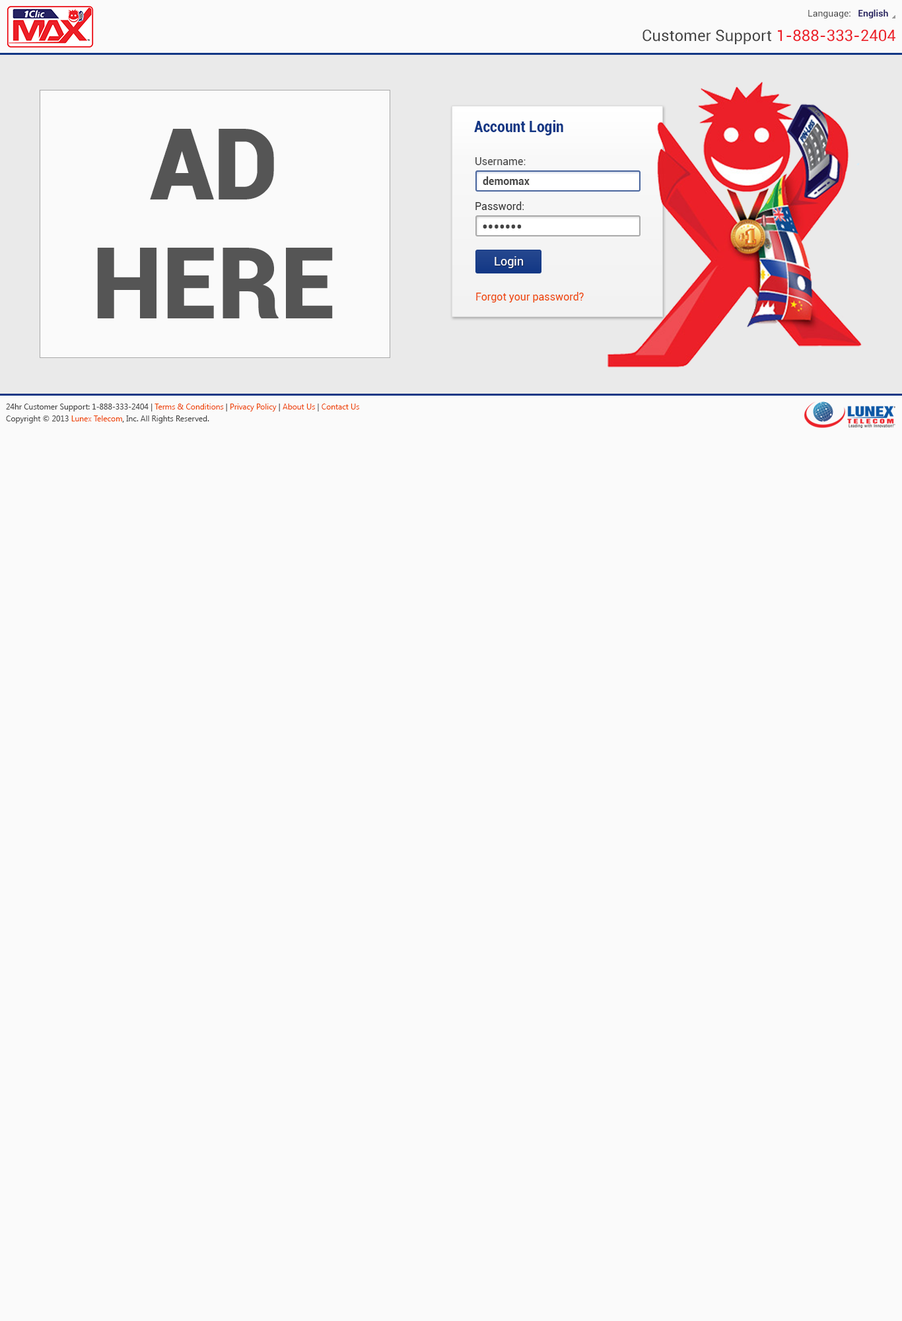
<style>
.page{position:relative;width:902px;height:1321px;background:#fafafa}
.page>*{position:absolute;margin:0}
.t1{font:9.2px "Roboto-Regular";color:#444444}
.t2{font:9.2px "Roboto-Bold";color:#262262}
.t3{font:15.5px "Roboto-Regular";color:#444444}
.t4{font:15.5px "Roboto-Regular";color:#ec2029}
.t5{font:15.9px "Roboto-BoldCondensed";color:#123785}
.t6{font:99.1px "Roboto-Black";color:#555555}
.t7{font:10.6px "Roboto-Regular";color:#444444}
.t8{font:10.6px "Roboto-Bold";color:#444444}
.t9{font:10.6px "Roboto-Regular";color:#333333}
.t10{font:15.9px "Roboto-Bold";color:#444444}
.t11{font:11.9px "Roboto-Regular";color:#ffffff}
.t12{font:10.6px "Roboto-Regular";color:#ee4400}
.t13{font:7.9px/11.9px "SegoeUI";color:#444444}
.t14{font:7.9px/11.9px "SegoeUI";color:#ee4400}
.t15{font:7.9px/11.9px "SegoeUI";color:#333333}
</style>
<div class="page">
<p class="t1" style="left:809px;top:9px;width:80px;height:9px">Language:   <span class="t2">English</span></p>
<p class="t3" style="left:643px;top:29px;width:129px;height:15px">Customer Support</p>
<p class="t4" style="left:778px;top:29px;width:118px;height:13px">1-888-333-2404</p>
<p class="t5" style="left:474px;top:120px;width:90px;height:15px">Account Login</p>
<p class="t6" style="left:97px;top:129px;width:236px;height:189px;text-align:center">AD<br>HERE</p>
<p class="t7" style="left:476px;top:157px;width:50px;height:8px">Username:</p>
<p class="t8" style="left:483px;top:176px;width:47px;height:9px">demomax</p>
<p class="t9" style="left:476px;top:202px;width:49px;height:8px">Password:</p>
<p class="t10" style="left:483px;top:225px;width:39px;height:4px">•••••••</p>
<p class="t11" style="left:495px;top:256px;width:29px;height:12px">Login</p>
<p class="t12" style="left:476px;top:292px;width:108px;height:11px">Forgot your password?</p>
<p class="t13" style="left:6px;top:404px;width:353px;height:19px">24hr Customer Support: 1-888-333-2404 | <span class="t14">Terms &amp; Conditions</span><span class="t15"> | </span><span class="t14">Privacy Policy</span><span class="t15"> | </span><span class="t14">About Us</span><span class="t15"> | </span><span class="t14">Contact Us<br></span>Copyright © 2013 <span class="t14">Lunex Telecom</span><span class="t15">,</span> Inc. All Rights Reserved.</p>
</div>
